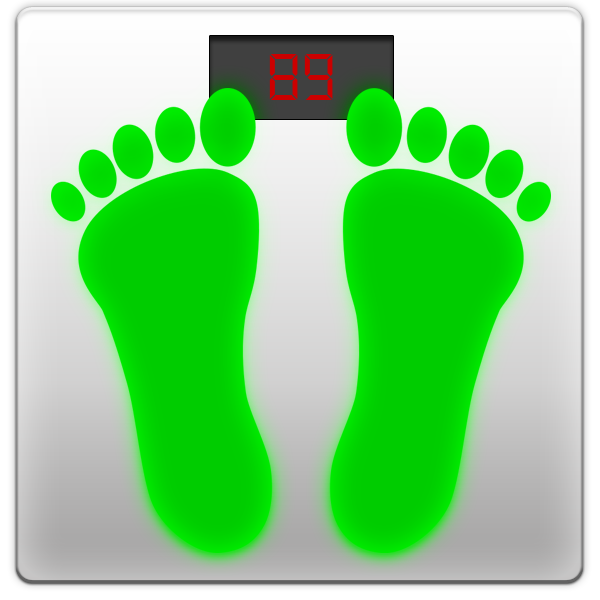
<style>
.page{position:relative;width:600px;height:600px}
.page>*{position:absolute;margin:0}
.t1{font:72px "DS-Digital";color:#cc0000}
</style>
<div class="page">
<p class="t1" style="left:269px;top:54px;width:64px;height:46px">89</p>
</div>
